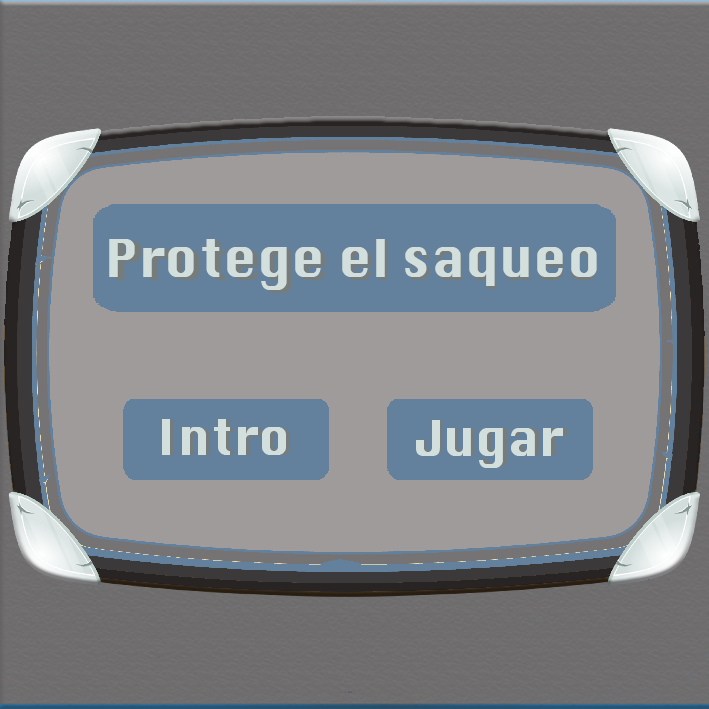
<style>
.page{position:relative;width:709px;height:709px;background:#a09b9b}
.page>*{position:absolute;margin:0}
.t1{font:50.9px "Silom";color:#d3dfdd}
.t2{font:52.1px "Silom";scale:0.96 1}
.t3{font:48px "Silom";color:#d3dfdd}
.t4{font:46.2px "Silom";scale:1.04 1}
.t5{font:47.9px "Silom";color:#d3dfdd}
.t6{font:46.3px "Silom";scale:1.05 1}
</style>
<div class="page">
<p class="t1" style="left:109px;top:239px;width:488px;height:51px">Protege el saqueo</p>
<p class="t2" style="left:116px;top:241px;width:481px;height:52px">Protege el saqueo</p>
<p class="t3" style="left:162px;top:419px;width:124px;height:36px">Intro</p>
<p class="t4" style="left:166px;top:420px;width:124px;height:35px">Intro</p>
<p class="t5" style="left:416px;top:420px;width:147px;height:48px">Jugar</p>
<p class="t6" style="left:418px;top:420px;width:150px;height:47px">Jugar</p>
</div>
